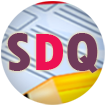
<style>
.page{position:relative;width:106px;height:106px;background:#ffffff}
.page>*{position:absolute;margin:0}
.t1{font:55.3px "TwCenMT-CondensedExtraBold";color:#703a5a;scale:1.12 1}
.t2{font:55.3px "TwCenMT-CondensedExtraBold";color:#ee1153;scale:1.12 1}
</style>
<div class="page">
<p class="t1" style="left:7px;top:33px;width:91px;height:40px">S<span class="t2">D</span>Q</p>
</div>
